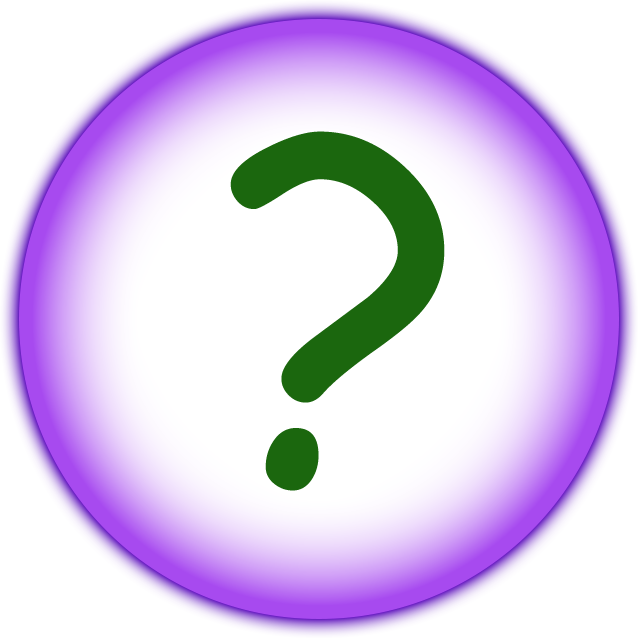
<style>
.page{position:relative;width:638px;height:638px;background:#ffffff}
.page>*{position:absolute;margin:0}
.t1{font:473.9px "ComicSansMS";color:#1b670e}
</style>
<div class="page">
<p class="t1" style="left:230px;top:131px;width:215px;height:360px">?</p>
</div>
